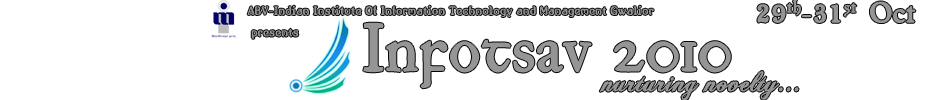
<style>
.page{position:relative;width:933px;height:100px;background:#ffffff}
.page>*{position:absolute;margin:0}
.t1{font:29px "ChelseaAlternates";color:#959595;font-weight:bold}
.t2{font:63px "JuniusIrish";color:#959595;font-weight:bold}
.t3{font:29px "ChopinScript";color:#959595;font-weight:bold}
</style>
<div class="page">
<p class="t1" style="left:757px;top:0px;width:159px;height:23px">29th-31st Oct</p>
<p class="t2" style="left:363px;top:22px;width:368px;height:67px">Infotsav 2010</p>
<p class="t3" style="left:599px;top:71px;width:200px;height:30px">nurturing novelty...</p>
</div>
